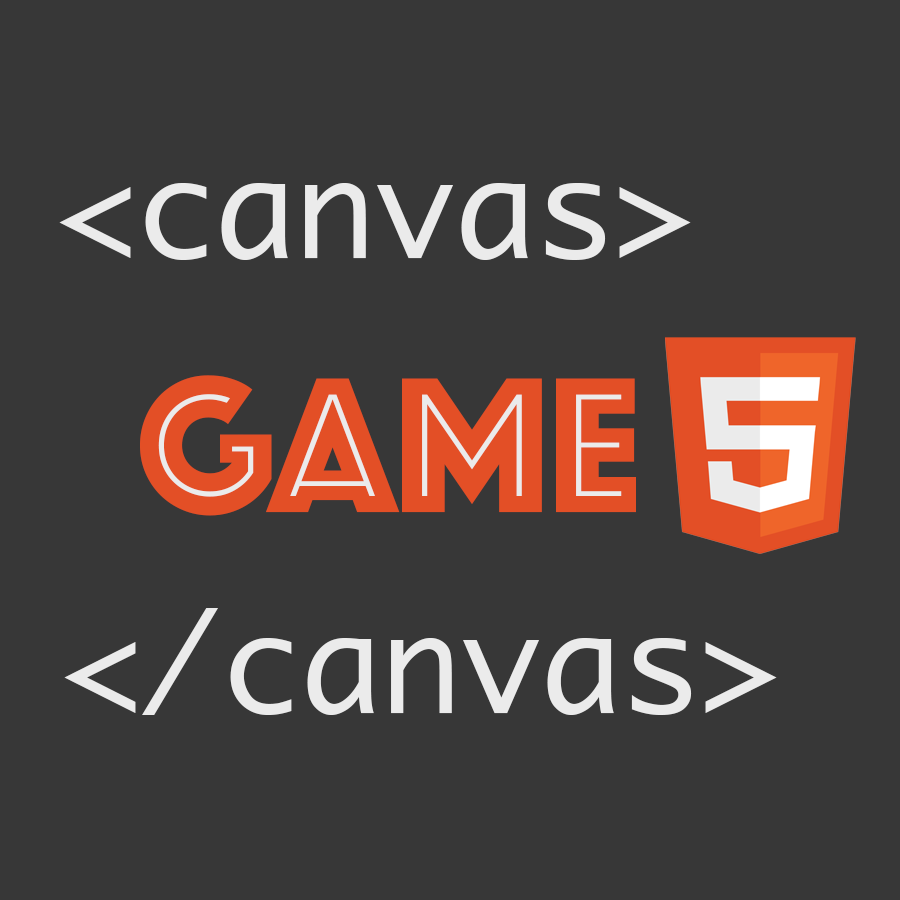
<style>
.page{position:relative;width:900px;height:900px;background:#373737}
.page>*{position:absolute;margin:0}
.t1{font:133.3px "Monaco";color:#ebebeb}
.t2{font:200px "Phosphate-Inline";color:#e34f26}
</style>
<div class="page">
<p class="t1" style="left:59px;top:183px;width:632px;height:77px">&lt;canvas&gt;</p>
<p class="t2" style="left:140px;top:375px;width:496px;height:141px">GAME</p>
<p class="t1" style="left:64px;top:608px;width:713px;height:107px">&lt;/canvas&gt;</p>
</div>
